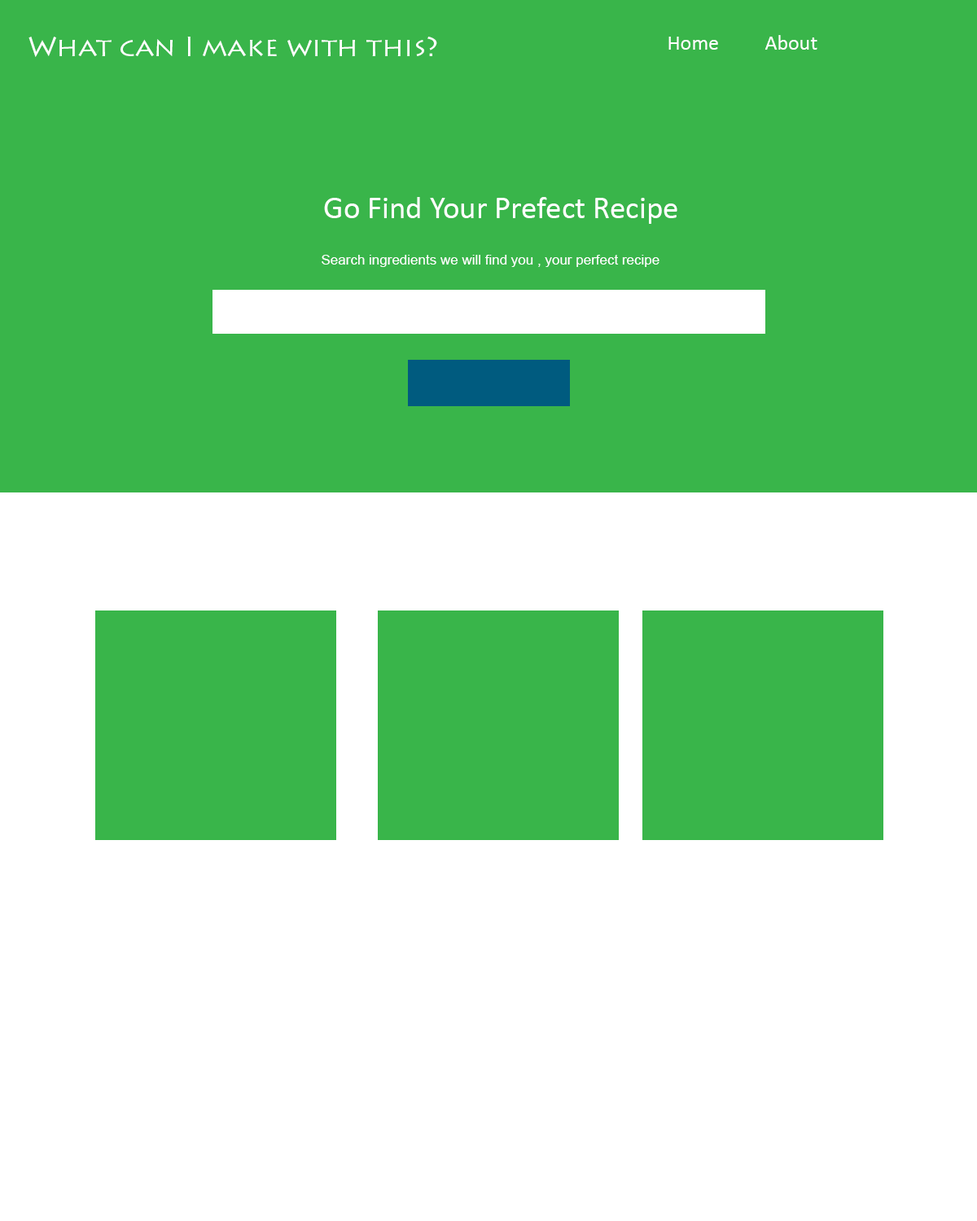
<style>
.page{position:relative;width:977px;height:1221px;background:#39b54a}
.page>*{position:absolute;margin:0}
.t1{font:26.9px "LithosPro-Regular";color:#ffffff}
.t2{font:21.2px "Calibri";color:#ffffff}
.t3{font:31.7px "Calibri";color:#ffffff}
.t4{font:13.8px "ArialMT";color:#ffffff}
</style>
<div class="page">
<p class="t1" style="left:28px;top:37px;width:409px;height:20px">?What can I make with this</p>
<p class="t2" style="left:668px;top:37px;width:50px;height:13px">Home</p>
<p class="t2" style="left:764px;top:35px;width:53px;height:15px">About</p>
<p class="t3" style="left:324px;top:197px;width:353px;height:27px">Go Find Your Prefect Recipe</p>
<p class="t4" style="left:321px;top:255px;width:338px;height:12px">Search ingredients we will find you , your perfect recipe</p>
</div>
